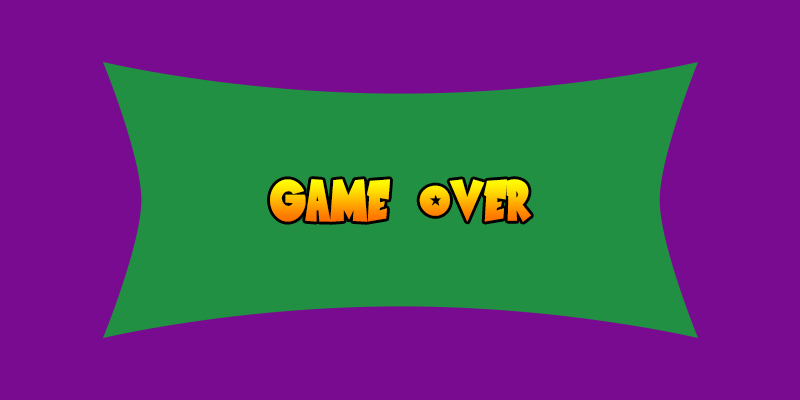
<style>
.page{position:relative;width:800px;height:400px;background:#790b90}
.page>*{position:absolute;margin:0}
.t1{font:60px "SaiyanSans"}
</style>
<div class="page">
<p class="t1" style="left:270px;top:179px;width:261px;height:43px">GAME OVER</p>
</div>
